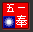
<style>
.page{position:relative;width:33px;height:32px;background:#f20000}
.page>*{position:absolute;margin:0}
.t1{font:10.4px "SimSun";color:#ffffff}
.t2{font:11.7px "SimSun";color:#ffffff}
</style>
<div class="page">
<p class="t1" style="left:7px;top:4px;width:18px;height:8px">五一</p>
<p class="t2" style="left:16px;top:15px;width:11px;height:12px">奉</p>
</div>
